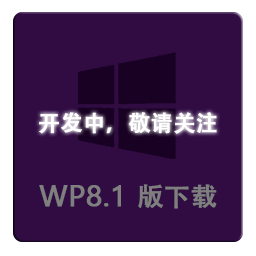
<style>
.page{position:relative;width:256px;height:256px;background:#300c43}
.page>*{position:absolute;margin:0}
.t1{font:22px "AdobeHeitiStd-Regular";color:#ffffff;font-weight:bold}
.t2{font:30px "Ebrima";color:#7f7f7f;font-weight:bold}
.t3{font:26px "AdobeHeitiStd-Regular";color:#7f7f7f;font-weight:bold}
</style>
<div class="page">
<p class="t1" style="left:39px;top:112px;width:178px;height:22px">开发中，敬请关注</p>
<p class="t2" style="left:39px;top:184px;width:178px;height:25px">WP8.1 <span class="t3">版下载</span></p>
</div>
